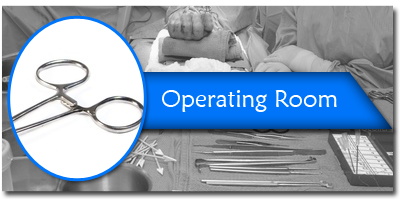
<style>
.page{position:relative;width:400px;height:200px}
.page>*{position:absolute;margin:0}
.t1{font:24px "MaiandraGD-Regular";color:#ffffff}
</style>
<div class="page">
<p class="t1" style="left:162px;top:90px;width:175px;height:22px">Operating Room</p>
</div>
